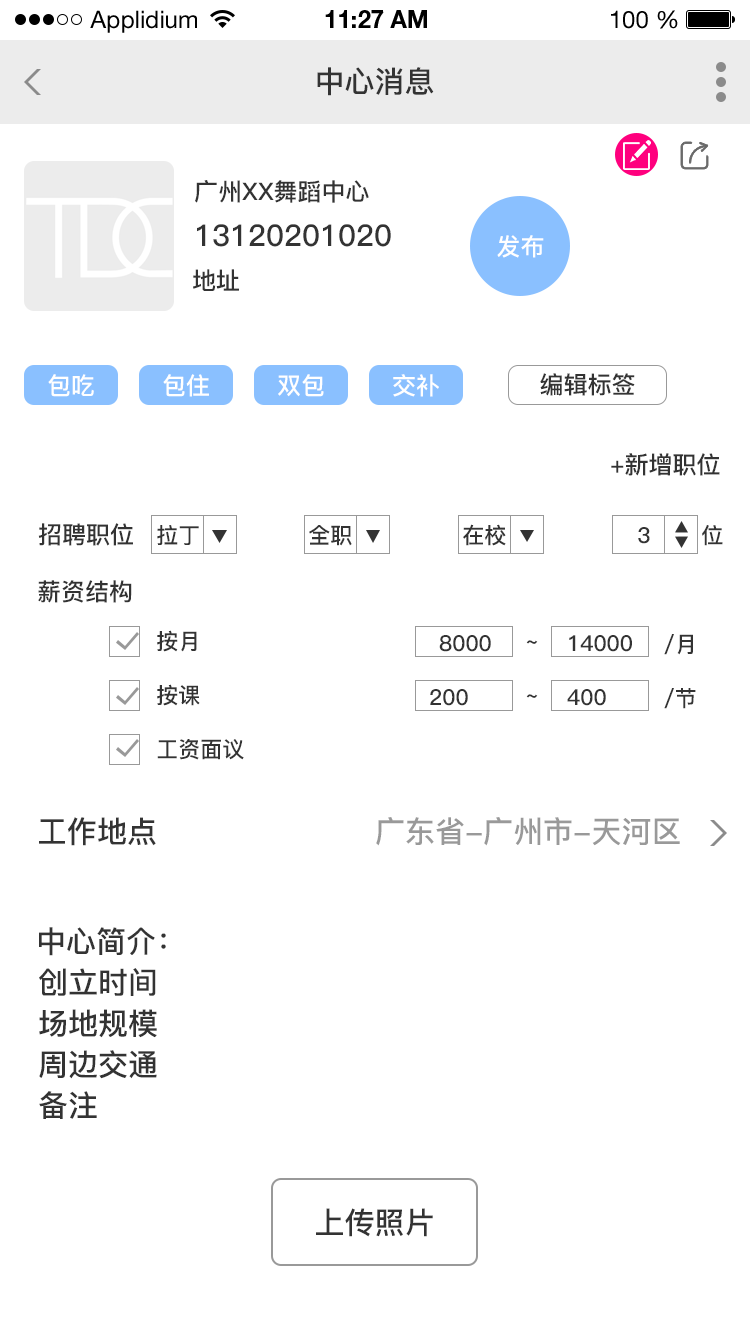
<style>
.page{position:relative;width:750px;height:1334px;background:#ffffff}
.page>*{position:absolute;margin:0}
.t1{font:24px "HelveticaNeueLTStd-Roman";color:#000000}
.t2{font:24px "HelveticaNeueLTStd-Bd";color:#000000}
.t3{font:30px "PingFang-SC-Bold";color:#333333}
.t4{font:24px "PingFang-SC-Bold";color:#333333}
.t5{font:24px "PingFang-SC-Bold";color:#ffffff}
.t6{font:22px "PingFang-SC-Bold";color:#333333}
.t7{font:30px "PingFang-SC-Bold";color:#999999}
</style>
<div class="page">
<p class="t1" style="left:90px;top:10px;width:107px;height:23px">Applidium</p>
<p class="t2" style="left:325px;top:10px;width:102px;height:18px">11:27 AM</p>
<p class="t1" style="left:611px;top:10px;width:67px;height:19px">100 %</p>
<p class="t3" style="left:317px;top:67px;width:117px;height:29px">中心消息</p>
<p class="t4" style="left:195px;top:180px;width:174px;height:23px">广州XX舞蹈中心</p>
<p class="t3" style="left:197px;top:224px;width:194px;height:23px">13120201020</p>
<p class="t5" style="left:497px;top:235px;width:47px;height:23px">发布</p>
<p class="t4" style="left:193px;top:269px;width:46px;height:22px">地址</p>
<p class="t5" style="left:48px;top:374px;width:46px;height:23px">包吃</p>
<p class="t5" style="left:163px;top:374px;width:46px;height:23px">包住</p>
<p class="t5" style="left:278px;top:374px;width:46px;height:23px">双包</p>
<p class="t5" style="left:393px;top:374px;width:46px;height:23px">交补</p>
<p class="t4" style="left:540px;top:373px;width:95px;height:23px">编辑标签</p>
<p class="t4" style="left:611px;top:453px;width:109px;height:23px">+新增职位</p>
<p class="t4" style="left:38px;top:523px;width:95px;height:23px">招聘职位</p>
<p class="t6" style="left:157px;top:525px;width:42px;height:20px">拉丁</p>
<p class="t6" style="left:309px;top:525px;width:43px;height:21px">全职</p>
<p class="t6" style="left:463px;top:524px;width:43px;height:22px">在校</p>
<p class="t6" style="left:638px;top:527px;width:12px;height:17px">3</p>
<p class="t6" style="left:702px;top:525px;width:21px;height:21px">位</p>
<p class="t4" style="left:38px;top:580px;width:94px;height:23px">薪资结构</p>
<p class="t6" style="left:157px;top:630px;width:40px;height:22px">按月</p>
<p class="t6" style="left:439px;top:635px;width:52px;height:17px">8000</p>
<p class="t6" style="left:526px;top:640px;width:12px;height:4px">~</p>
<p class="t6" style="left:569px;top:635px;width:63px;height:17px">14000</p>
<p class="t6" style="left:664px;top:634px;width:29px;height:21px">/月</p>
<p class="t6" style="left:157px;top:684px;width:43px;height:22px">按课</p>
<p class="t6" style="left:430px;top:689px;width:38px;height:17px">200</p>
<p class="t6" style="left:567px;top:689px;width:39px;height:17px">400</p>
<p class="t6" style="left:664px;top:688px;width:32px;height:21px">/节</p>
<p class="t6" style="left:526px;top:694px;width:12px;height:4px">~</p>
<p class="t6" style="left:157px;top:739px;width:87px;height:21px">工资面议</p>
<p class="t3" style="left:39px;top:817px;width:117px;height:29px">工作地点</p>
<p class="t7" style="left:376px;top:817px;width:304px;height:29px">广东省-广州市-天河区</p>
<p class="t3" style="left:39px;top:927px;width:127px;height:29px">中心简介：</p>
<p class="t3" style="left:39px;top:968px;width:117px;height:28px">创立时间</p>
<p class="t3" style="left:39px;top:1009px;width:118px;height:29px">场地规模</p>
<p class="t3" style="left:39px;top:1050px;width:118px;height:29px">周边交通</p>
<p class="t3" style="left:39px;top:1091px;width:58px;height:28px">备注</p>
<p class="t3" style="left:316px;top:1208px;width:117px;height:29px">上传照片</p>
</div>
